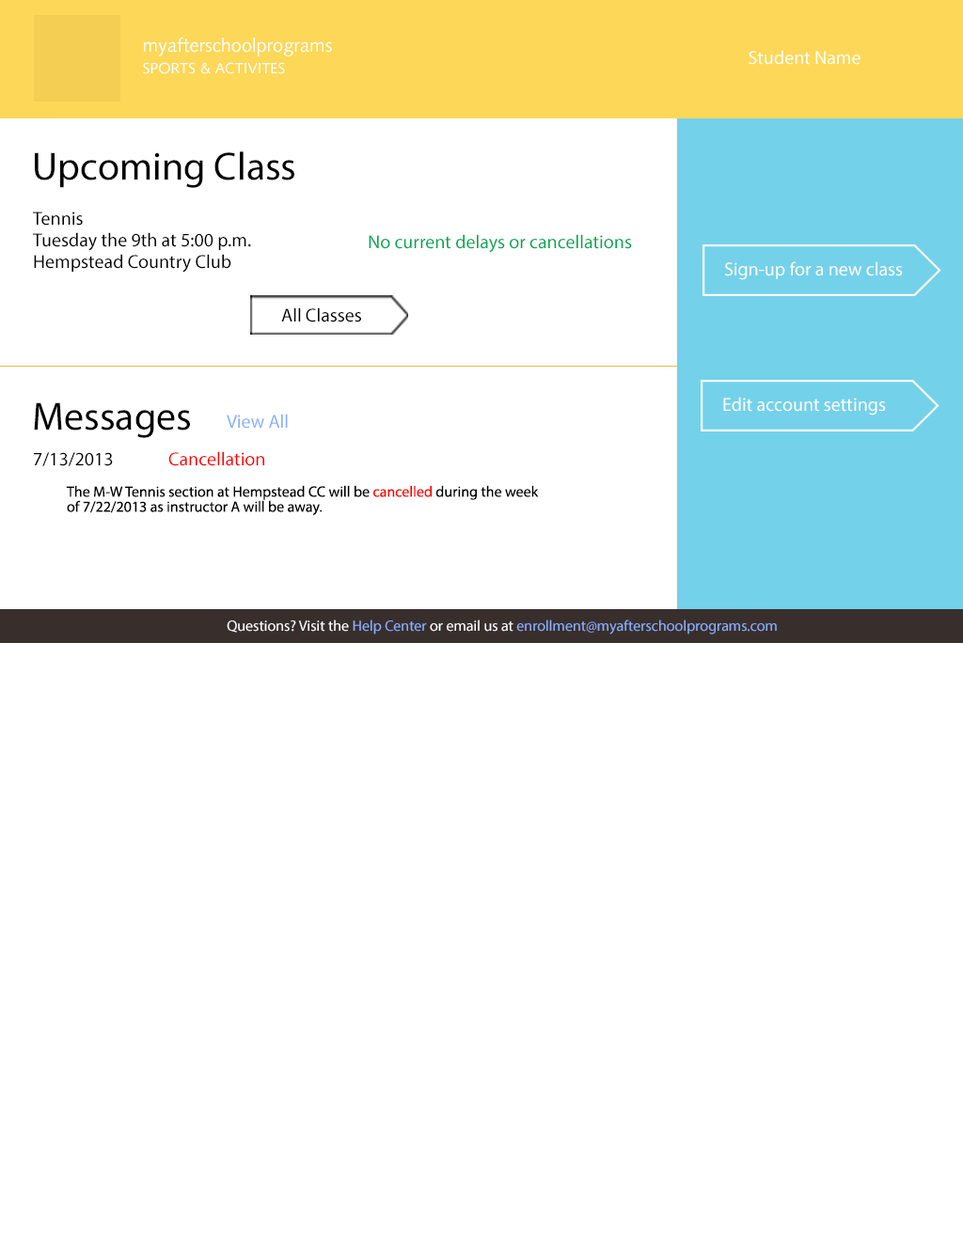
<style>
.page{position:relative;width:963px;height:1238px;background:#ffffff}
.page>*{position:absolute;margin:0}
.t1{font:18.8px/21.6px "SyntaxLTStd-Roman";color:#ffffff}
.t2{font:15px/21.6px "SyntaxLTStd-Roman";color:#ffffff}
.t3{font:18.8px "MyriadPro-Regular";color:#fffff8}
.t4{font:39.5px "MyriadPro-Regular";color:#000000}
.t5{font:18.8px/21.6px "MyriadPro-Regular";color:#000000}
.t6{font:18.8px "MyriadPro-Regular";color:#00a651}
.t7{font:18.8px "MyriadPro-Regular";color:#feffff}
.t8{font:18.8px "MyriadPro-Regular";color:#000000}
.t9{font:18.8px "MyriadPro-Regular";color:#8ab0fd}
.t10{font:18.8px "MyriadPro-Regular";color:#ff0000}
.t11{font:15px/15px "MyriadPro-Regular";color:#000000}
.t12{font:15px/15px "MyriadPro-Regular";color:#ff0000}
.t13{font:15px "MyriadPro-Regular";color:#8ab0fd}
.t14{font:15px "MyriadPro-Regular";color:#ffffff}
</style>
<div class="page">
<p class="t1" style="left:143px;top:37px;width:189px;height:37px">myafterschoolprograms<br><span class="t2">SPORTS &amp; ACTIVITES</span></p>
<p class="t3" style="left:748px;top:50px;width:112px;height:15px">Student Name</p>
<p class="t4" style="left:35px;top:151px;width:259px;height:37px">Upcoming Class</p>
<p class="t5" style="left:33px;top:212px;width:218px;height:61px;text-align:justify">Tennis<br>Tuesday the 9th at 5:00 p.m.<br>Hempstead Country Club</p>
<p class="t6" style="left:369px;top:234px;width:263px;height:19px">No current delays or cancellations</p>
<p class="t7" style="left:725px;top:261px;width:178px;height:19px">Sign-up for a new class</p>
<p class="t8" style="left:281px;top:307px;width:80px;height:16px">All Classes</p>
<p class="t7" style="left:723px;top:397px;width:163px;height:19px">Edit account settings</p>
<p class="t4" style="left:34px;top:402px;width:156px;height:36px">Messages</p>
<p class="t9" style="left:227px;top:414px;width:61px;height:15px">View All</p>
<p class="t10" style="left:34px;top:451px;width:230px;height:15px"><span class="t8">7/13/2013   </span>Cancellation</p>
<p class="t11" style="left:66px;top:485px;width:473px;height:30px">The M-W Tennis section at Hempstead CC will be <span class="t12">cancelled </span>during the week of 7/22/2013 as instructor A will be away.</p>
<p class="t13" style="left:227px;top:620px;width:550px;height:15px"><span class="t14">Questions? Visit the </span>Help Center <span class="t14">or email us at </span>enrollment@myafterschoolprograms.com</p>
</div>
